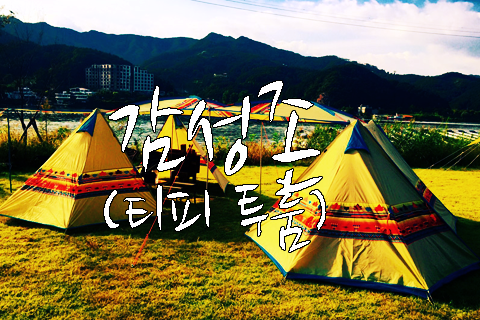
<style>
.page{position:relative;width:480px;height:320px}
.page>*{position:absolute;margin:0}
.t1{font:75px/125px "NanumBrush";color:#ffffff}
.t2{font:125px/125px "NanumBrush";color:#ffffff}
</style>
<div class="page">
<p class="t1" style="left:104px;top:81px;width:222px;height:171px;text-align:center"><span class="t2">감성존<br></span>(티피 투룸)</p>
</div>
